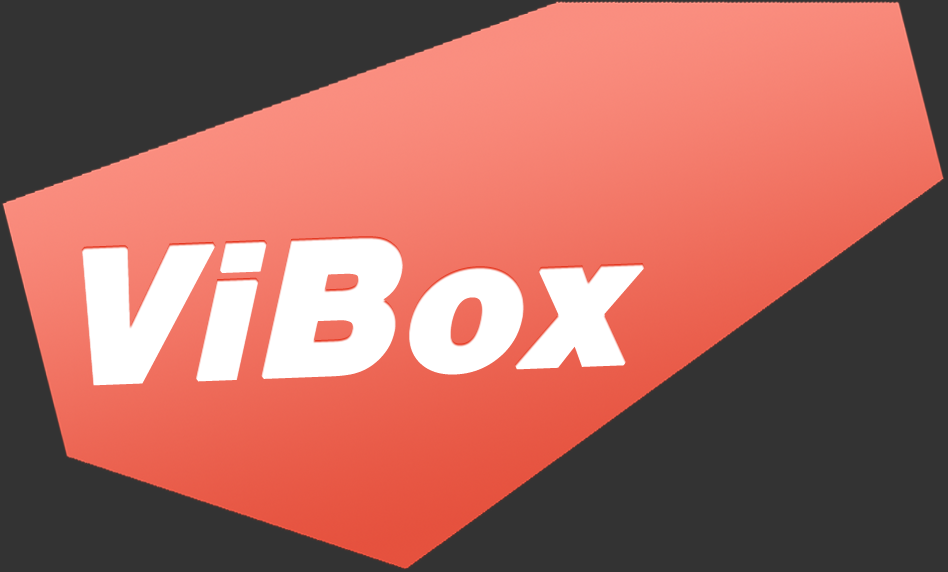
<style>
.page{position:relative;width:948px;height:572px;background:#333333}
.page>*{position:absolute;margin:0}
.t1{font:200px "HelveticaObl-He";color:#ffffff;font-weight:bold}
</style>
<div class="page">
<p class="t1" style="left:81px;top:236px;width:564px;height:150px;rotate:-2deg">ViBox</p>
</div>
